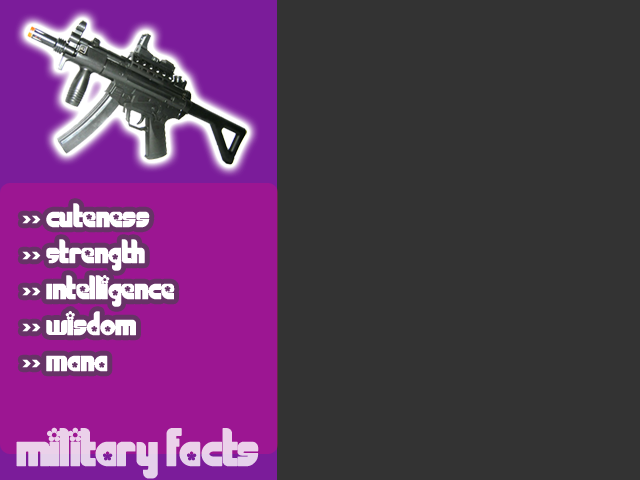
<style>
.page{position:relative;width:640px;height:480px;background:#333333}
.page>*{position:absolute;margin:0}
.t1{font:30px "Chick";color:#ffffff}
.t2{font:48px "Chick";color:#ebd1ea}
</style>
<div class="page">
<p class="t1" style="left:22px;top:203px;width:153px;height:169px">&gt;&gt; cuteness<br>&gt;&gt; Strength<br>&gt;&gt; Intelligence<br>&gt;&gt; Wisdom<br>&gt;&gt; Mana</p>
<p class="t2" style="left:16px;top:427px;width:243px;height:52px">military facts</p>
</div>
